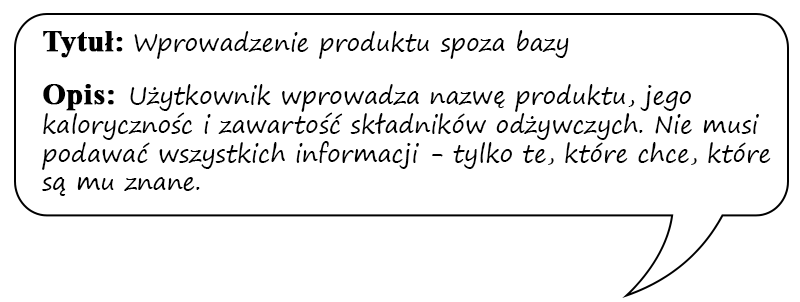
<style>
.page{position:relative;width:800px;height:302px;background:#ffffff}
.page>*{position:absolute;margin:0}
.t1{font:24px "SegoePrint";color:#000000}
.t2{font:30px "TimesNewRomanPS-BoldMT";color:#000000;font-weight:bold}
</style>
<div class="page">
<p class="t1" style="left:42px;top:30px;width:729px;height:166px"><span class="t2">Tytuł: </span>Wprowadzenie produktu spoza bazy<br><br><span class="t2">Opis:  </span>Użytkownik wprowadza nazwę produktu, jego kalorycznośc i zawartość składników odżywczych. Nie musi podawać wszystkich informacji - tylko te, które chce, które są mu znane.</p>
</div>
